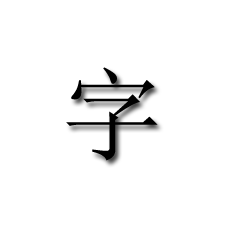
<style>
.page{position:relative;width:227px;height:227px;background:#ffffff}
.page>*{position:absolute;margin:0}
.t1{font:100px "SimSun";color:#000000}
</style>
<div class="page">
<p class="t1" style="left:66px;top:67px;width:92px;height:94px">字</p>
</div>
